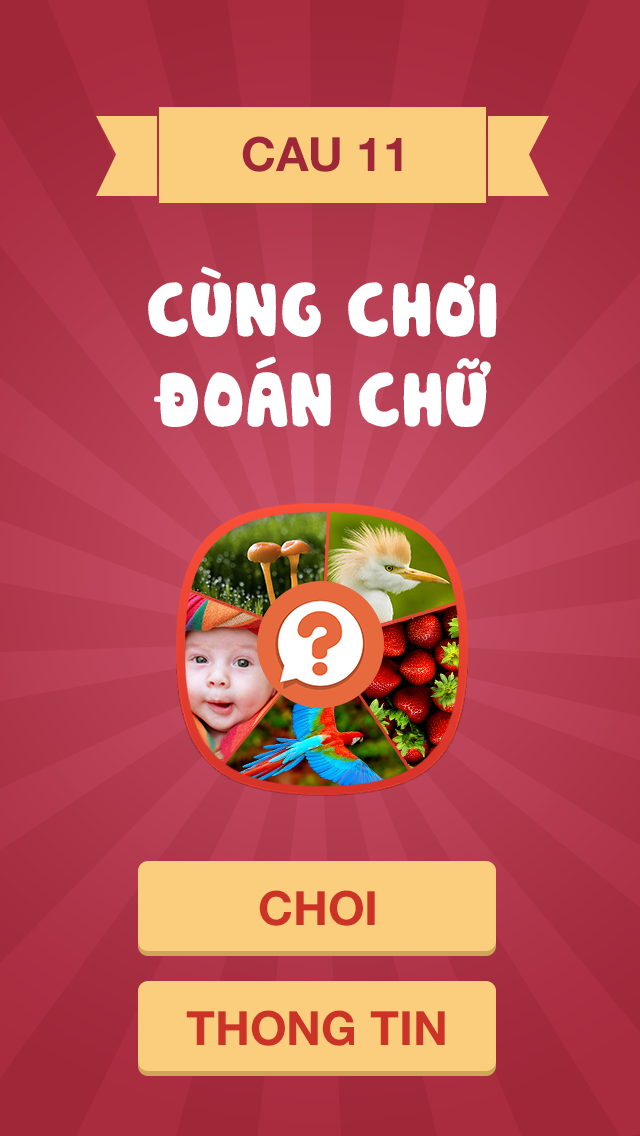
<style>
.page{position:relative;width:640px;height:1136px}
.page>*{position:absolute;margin:0}
.t1{font:47.1px "HelveticaNeueLTStd-Bd";color:#9f2738}
.t2{font:75px "UTM-Cookies";color:#ffffff}
.t3{font:47.2px "HelveticaNeueLTStd-Bd";color:#cb3327}
</style>
<div class="page">
<p class="t1" style="left:242px;top:136px;width:160px;height:36px">CAU 11</p>
<p class="t2" style="left:148px;top:266px;width:349px;height:161px;text-align:center">CÙNG CHƠI<br>ĐOÁN CHỮ</p>
<p class="t3" style="left:259px;top:890px;width:116px;height:36px">CHOI</p>
<p class="t3" style="left:186px;top:1010px;width:259px;height:36px">THONG TIN</p>
</div>
